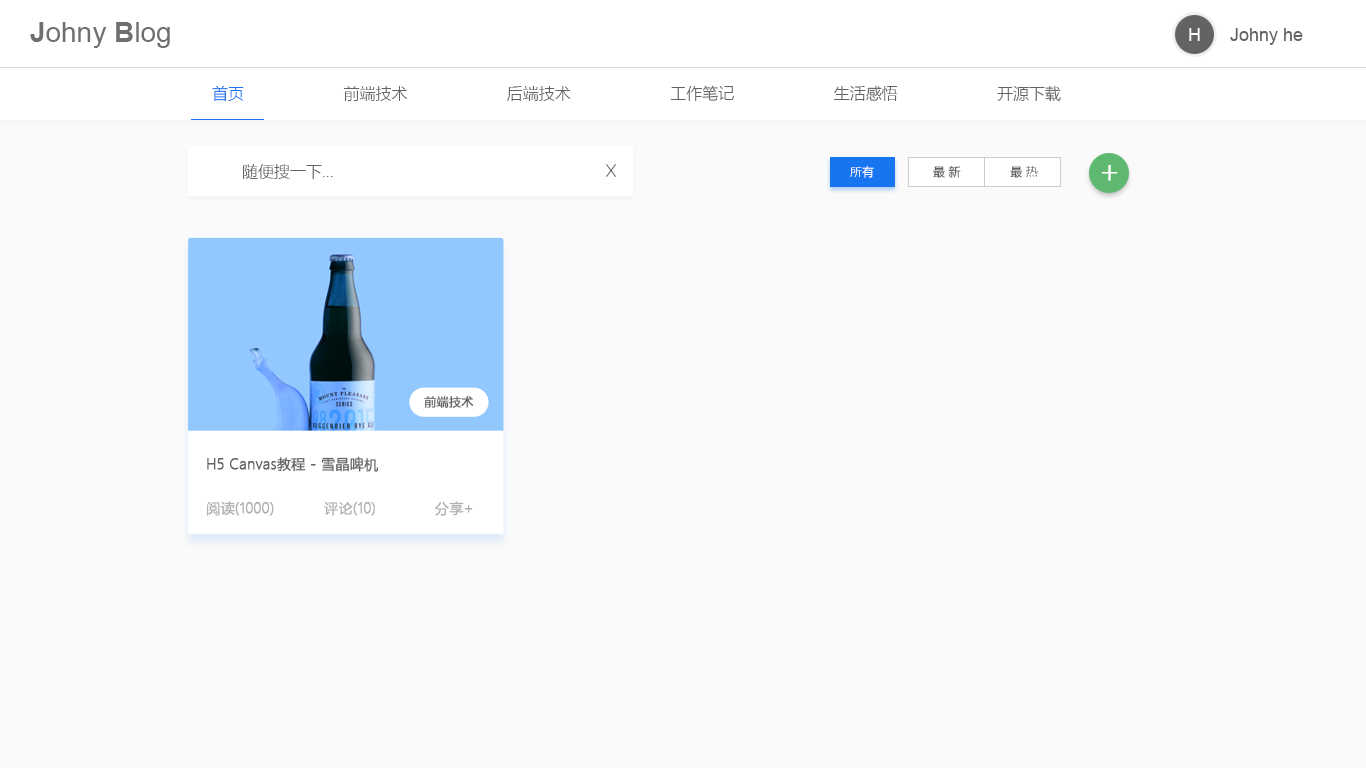
<style>
.page{position:relative;width:1366px;height:768px;background:#fafafa}
.page>*{position:absolute;margin:0}
.t1{font:28px "ArialMT";color:#6f6f6f}
.t2{font:28px "Arial-BoldMT";color:#6f6f6f}
.t3{font:18px "ArialMT";color:#ffffff}
.t4{font:18px "ArialMT";color:#636363}
.t5{font:16px "MicrosoftYaHeiLight";color:#636363}
.t6{font:16px "MicrosoftYaHeiLight";color:#1875f0}
.t7{font:12px "MicrosoftYaHeiLight";color:#ffffff}
.t8{font:12px "MicrosoftYaHeiLight";color:#636363}
.t9{font:30.4px "MicrosoftYaHeiLight";color:#ffffff;font-weight:bold}
.t10{font:12px "MicrosoftYaHeiLight";color:#636363;font-weight:bold}
.t11{font:14px "MicrosoftYaHeiLight";color:#636363;font-weight:bold}
.t12{font:14px "MicrosoftYaHeiLight";color:#b0b0b0;font-weight:bold}
</style>
<div class="page">
<p class="t1" style="left:30px;top:22px;width:140px;height:26px"><span class="t2">J</span>ohny <span class="t2">B</span>log</p>
<p class="t3" style="left:1189px;top:28px;width:11px;height:13px">H</p>
<p class="t4" style="left:1230px;top:28px;width:73px;height:17px">Johny he</p>
<p class="t5" style="left:212px;top:85px;width:849px;height:17px"><span class="t6">首页</span>                     前端技术                     后端技术                     工作笔记                     生活感悟                     开源下载</p>
<p class="t5" style="left:243px;top:164px;width:90px;height:15px">随便搜一下...</p>
<p class="t7" style="left:850px;top:166px;width:24px;height:12px">所有</p>
<p class="t8" style="left:933px;top:165px;width:105px;height:13px">最 新              最 热</p>
<p class="t9" style="left:1101px;top:165px;width:17px;height:16px">+</p>
<p class="t10" style="left:424px;top:396px;width:50px;height:12px">前端技术</p>
<p class="t11" style="left:207px;top:457px;width:172px;height:15px">H5 Canvas教程 - 雪晶啤机</p>
<p class="t12" style="left:207px;top:501px;width:266px;height:15px">阅读(1000)           评论(10)             分享+</p>
</div>
